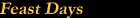
<style>
.page{position:relative;width:140px;height:18px;background:#000000}
.page>*{position:absolute;margin:0}
.t1{font:18px "Garamond-Bold";color:#fec45f;font-style:italic}
</style>
<div class="page">
<p class="t1" style="left:0px;top:2px;width:83px;height:17px">Feast Days</p>
</div>
